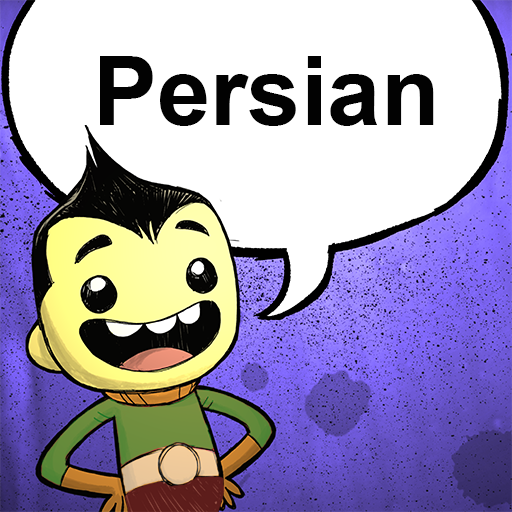
<style>
.page{position:relative;width:512px;height:512px;background:#ffffff}
.page>*{position:absolute;margin:0}
.t1{font:96px "Arial-BoldMT";color:#020202}
</style>
<div class="page">
<p class="t1" style="left:100px;top:56px;width:334px;height:70px">Persian</p>
</div>
